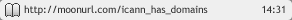
<style>
.page{position:relative;width:292px;height:20px;background:#efefef}
.page>*{position:absolute;margin:0}
.t1{font:10px "TrebuchetMS";color:#333333}
</style>
<div class="page">
<p class="t1" style="left:24px;top:5px;width:184px;height:10px">http://moonurl.com/icann_has_domains</p>
<p class="t1" style="left:262px;top:5px;width:23px;height:8px">14:31</p>
</div>
